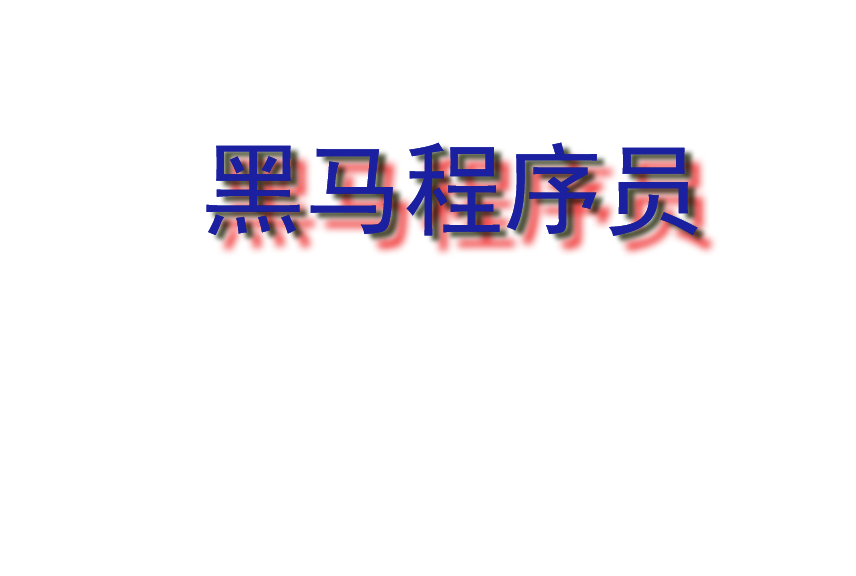
<style>
.page{position:relative;width:856px;height:576px;background:#ffffff}
.page>*{position:absolute;margin:0}
.t1{font:100px "SimHei";color:#1a209f}
</style>
<div class="page">
<p class="t1" style="left:206px;top:142px;width:492px;height:94px">黑马程序员</p>
<p class="t1" style="left:206px;top:142px;width:492px;height:94px">黑马程序员</p>
</div>
